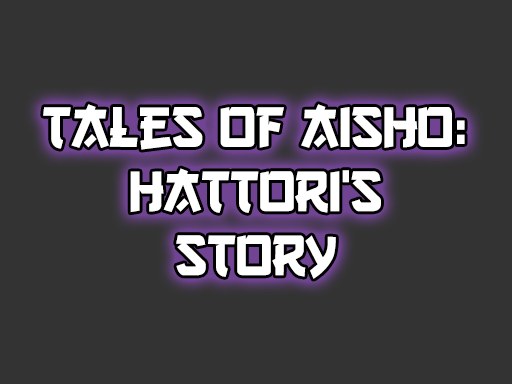
<style>
.page{position:relative;width:512px;height:384px;background:#333333}
.page>*{position:absolute;margin:0}
.t1{font:60px/64.1px "GangofThree";letter-spacing:-0.012em;color:#ffffff}
</style>
<div class="page">
<p class="t1" style="left:43px;top:104px;width:422px;height:175px;text-align:center">Tales of Aisho:<br>Hattori’s<br>Story</p>
</div>
